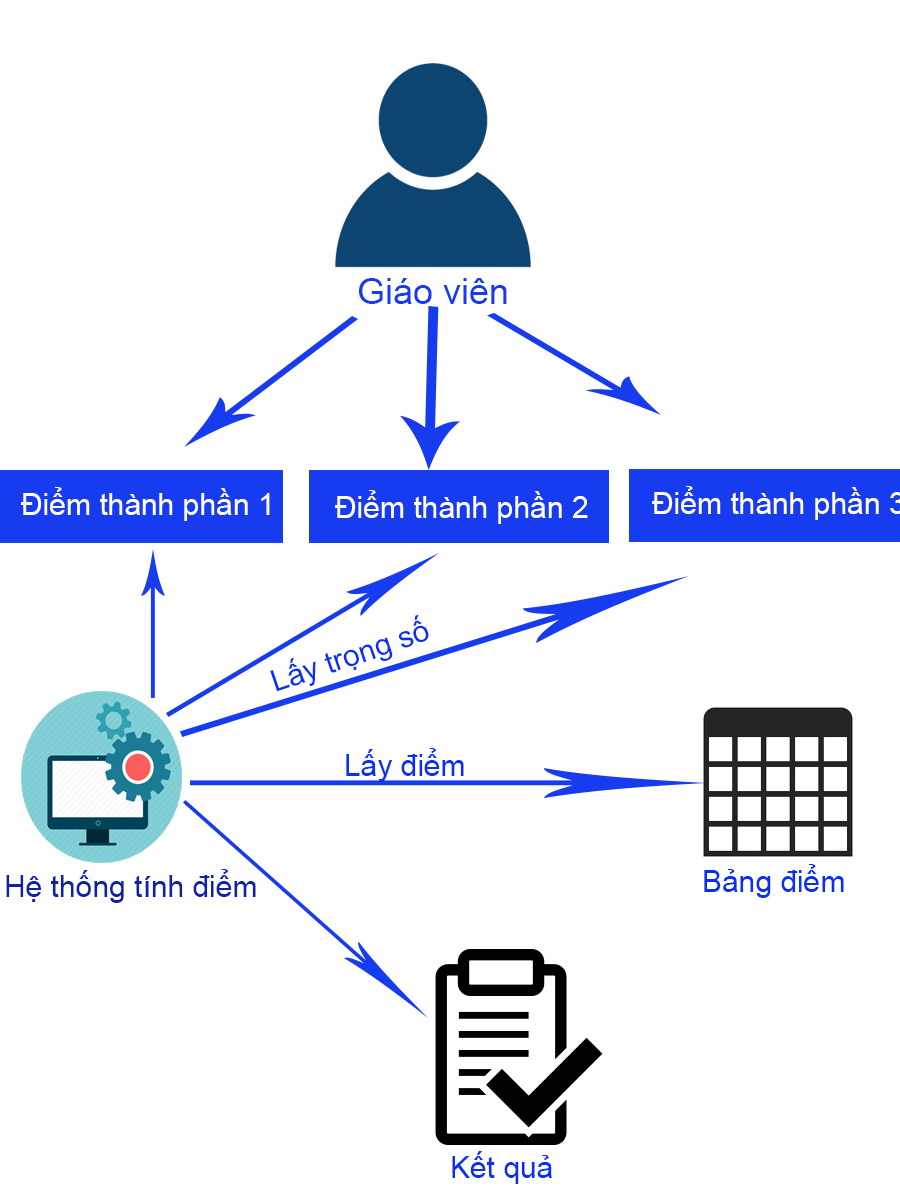
<style>
.page{position:relative;width:900px;height:1200px;background:#ffffff}
.page>*{position:absolute;margin:0}
.t1{font:36px "ArialMT";color:#173bef}
.t2{font:30px "ArialMT";color:#ffffff}
.t3{font:30px "ArialMT";color:#0930f2}
.t4{font:30px "ArialMT";color:#0f21a9}
</style>
<div class="page">
<p class="t1" style="left:358px;top:278px;width:149px;height:26px">Giáo viên</p>
<p class="t2" style="left:21px;top:487px;width:249px;height:34px">Điểm thành phần 1</p>
<p class="t2" style="left:335px;top:490px;width:253px;height:34px">Điểm thành phần 2</p>
<p class="t3" style="left:270px;top:614px;width:159px;height:78px;rotate:-19deg">Lấy trọng số</p>
<p class="t3" style="left:346px;top:748px;width:118px;height:34px">Lấy điểm</p>
<p class="t4" style="left:6px;top:869px;width:250px;height:34px">Hệ thống tính điểm</p>
<p class="t3" style="left:704px;top:864px;width:140px;height:34px">Bảng điểm</p>
<p class="t3" style="left:452px;top:1151px;width:100px;height:33px">Kết quả</p>
</div>
